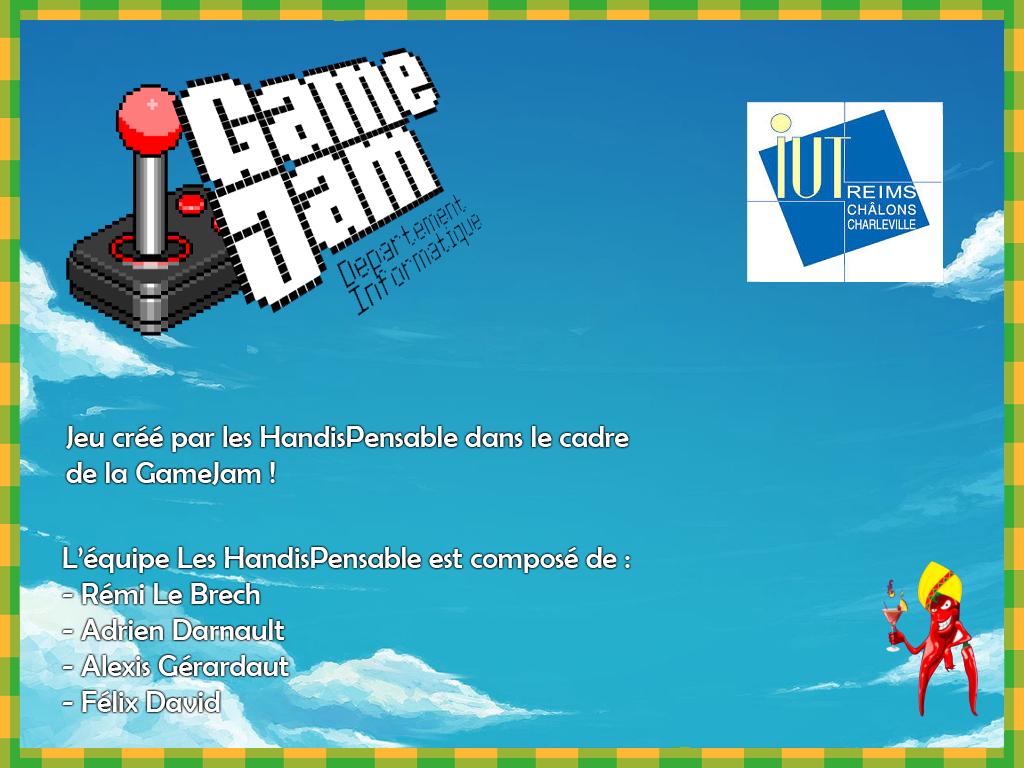
<style>
.page{position:relative;width:1024px;height:768px}
.page>*{position:absolute;margin:0}
.t1{font:30px "BerlinSansFB-Reg";color:#ffffff}
</style>
<div class="page">
<p class="t1" style="left:66px;top:426px;width:563px;height:59px">Jeu créé par les HandisPensable dans le cadre<br>de la GameJam !</p>
<p class="t1" style="left:62px;top:547px;width:568px;height:165px">L’équipe Les HandisPensable est composé de :<br>- Rémi Le Brech<br>- Adrien Darnault<br>- Alexis Gérardaut<br>- Félix David</p>
</div>
